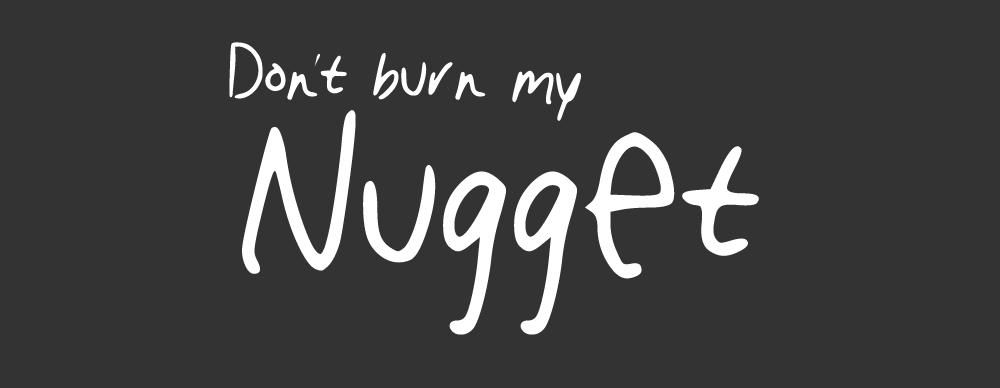
<style>
.page{position:relative;width:1000px;height:388px;background:#333333}
.page>*{position:absolute;margin:0}
.t1{font:145px "My_handwriting";color:#ffffff}
.t2{font:50px "EdwardianScriptITC";color:#ffffff}
.t3{font:424px "My_handwriting";color:#ffffff}
</style>
<div class="page">
<p class="t1" style="left:229px;top:42px;width:352px;height:79px">Dont burn my</p>
<p class="t2" style="left:314px;top:54px;width:6px;height:12px">'</p>
<p class="t3" style="left:242px;top:110px;width:517px;height:225px">Nugget</p>
</div>
